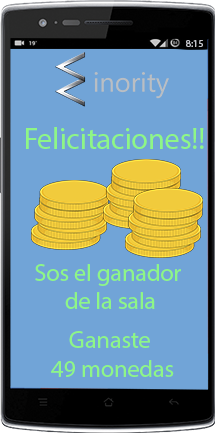
<style>
.page{position:relative;width:215px;height:433px;background:#71a4d7}
.page>*{position:absolute;margin:0}
.t1{font:10px "MyriadPro-Regular";color:#c4c5cb}
.t2{font:30px "MyriadPro-Regular";color:#8ef686}
.t3{font:24px "MyriadPro-Regular";color:#8ef686}
</style>
<div class="page">
<p class="t1" style="left:186px;top:40px;width:17px;height:7px">8:15</p>
<p class="t2" style="left:26px;top:127px;width:178px;height:22px">Felicitaciones!!</p>
<p class="t3" style="left:35px;top:264px;width:146px;height:45px;text-align:center">Sos el ganador <br>de la sala</p>
<p class="t3" style="left:51px;top:331px;width:123px;height:46px;text-align:center">Ganaste <br>49 monedas</p>
</div>
